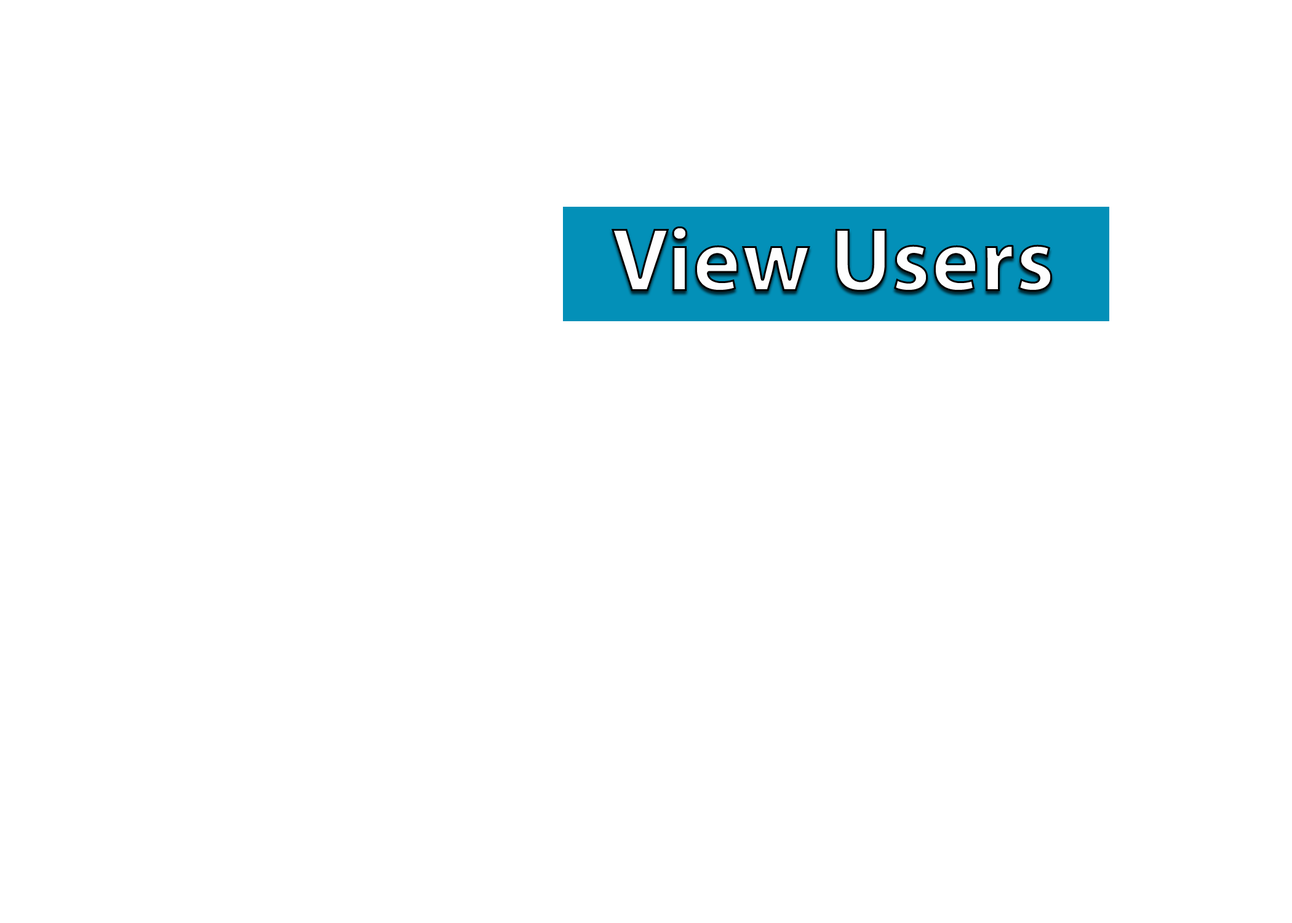
<style>
.page{position:relative;width:1292px;height:923px;background:#ffffff}
.page>*{position:absolute;margin:0}
.t1{font:92.3px "MyriadPro-Bold";color:#fefefe}
</style>
<div class="page">
<p class="t1" style="left:612px;top:226px;width:440px;height:66px">View Users</p>
</div>
